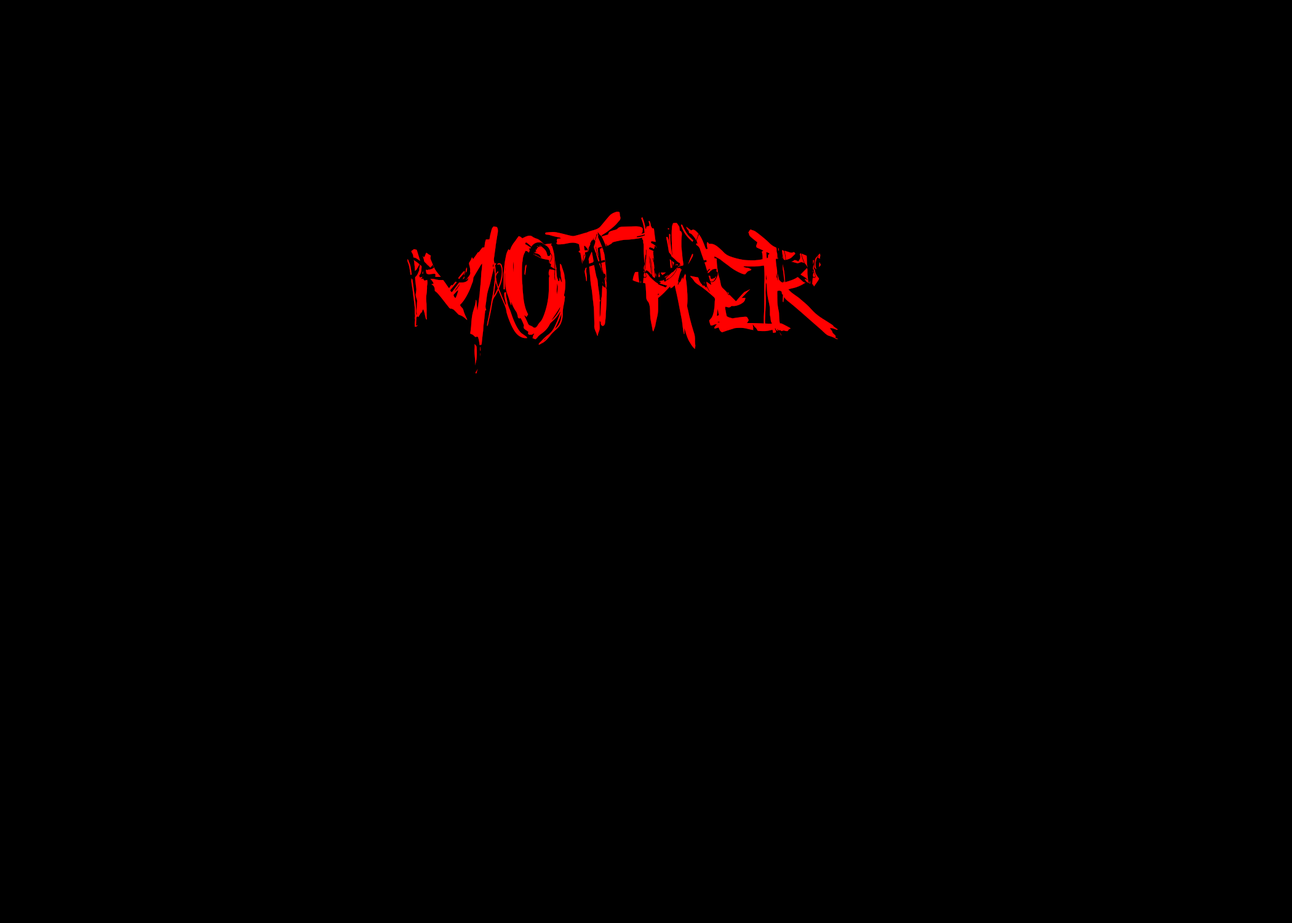
<style>
.page{position:relative;width:1292px;height:923px;background:#000000}
.page>*{position:absolute;margin:0}
.t1{font:184.6px "WhoasksSatan";color:#ff0000}
.t2{font:61.5px "WhoasksSatan";color:#000000}
.t3{font:184.6px "WhoasksSatan";color:#000000}
</style>
<div class="page">
<p class="t1" style="left:270px;top:212px;width:569px;height:161px"><span class="t2">Mop</span><span class="t3">t</span>Mother</p>
</div>
